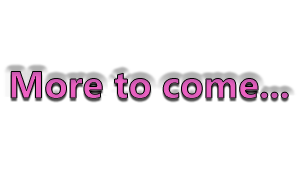
<style>
.page{position:relative;width:300px;height:170px;background:#ffffff}
.page>*{position:absolute;margin:0}
.t1{font:38px "SegoeUI-Bold";color:#dd5db9}
</style>
<div class="page">
<p class="t1" style="left:11px;top:71px;width:278px;height:28px">More to come...</p>
</div>
